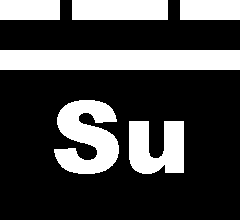
<style>
.page{position:relative;width:240px;height:220px;background:#000000}
.page>*{position:absolute;margin:0}
.t1{font:12px "Arial-Black";color:#ffffff}
</style>
<div class="page">
<p class="t1" style="left:54px;top:100px;width:130px;height:74px;text-align:center">Su</p>
</div>
